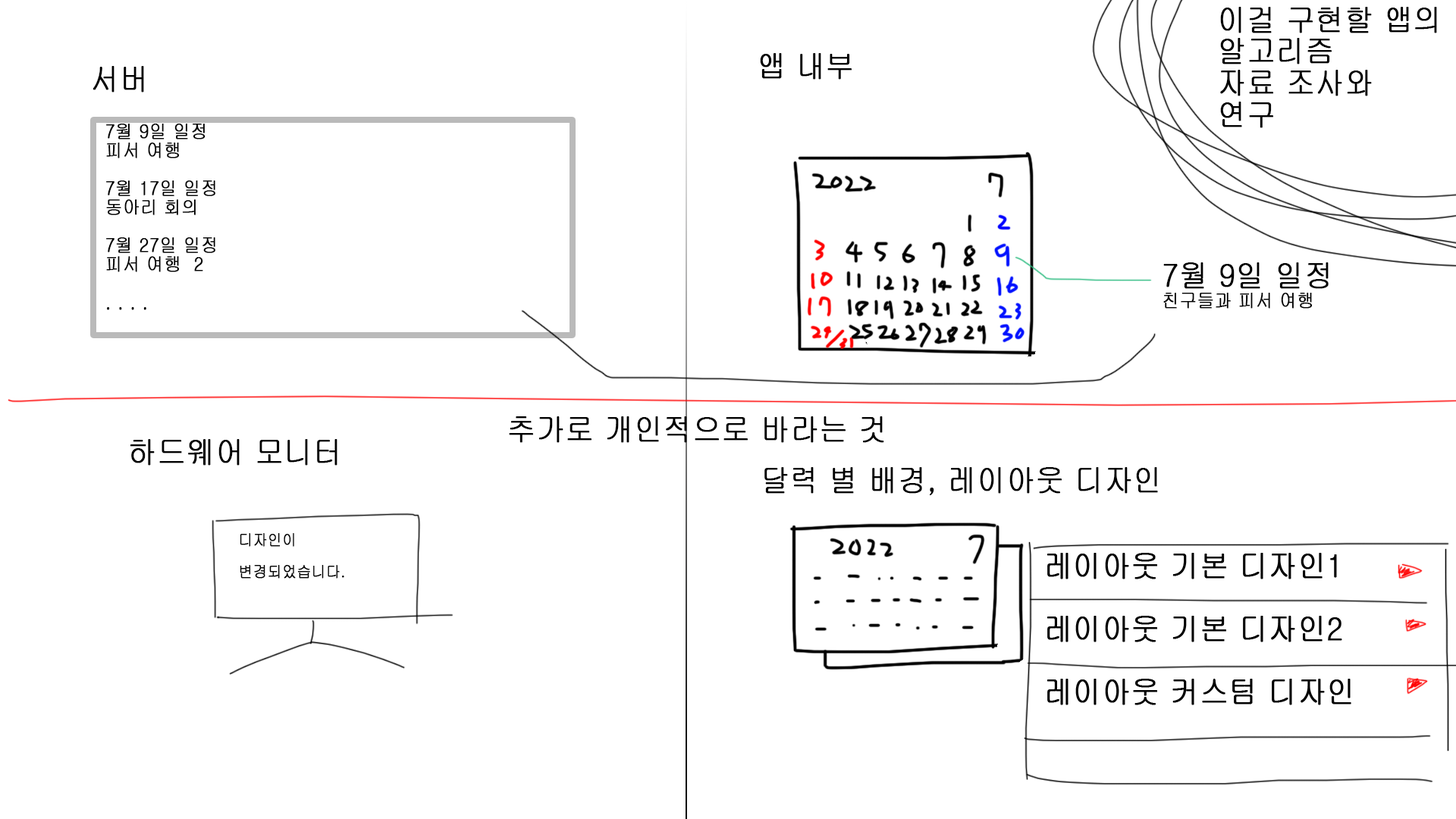
<style>
.page{position:relative;width:1456px;height:819px;background:#ffffff}
.page>*{position:absolute;margin:0}
.t1{font:31.6px/31.6px "Gulim";color:#000000;font-weight:bold;scale:0.9 1}
.t2{font:31.6px "Gulim";color:#000000;font-weight:bold;scale:0.9 1}
.t3{font:19px/19px "Gulim";color:#000000;font-weight:bold;scale:0.9 1}
.t4{font:19px/31.6px "Gulim";color:#000000;font-weight:bold;scale:0.9 1}
.t5{font:15.8px/31.6px "Gulim";color:#000000;font-weight:bold;scale:0.9 1}
</style>
<div class="page">
<p class="t1" style="left:1220px;top:7px;width:217px;height:121px">이걸 구현할 앱의<br>알고리즘<br>자료 조사와<br>연구</p>
<p class="t2" style="left:760px;top:53px;width:92px;height:27px">앱 내부</p>
<p class="t2" style="left:93px;top:66px;width:51px;height:27px">서버</p>
<p class="t3" style="left:106px;top:124px;width:109px;height:186px">7월 9일 일정<br>피서 여행<br><br>7월 17일 일정<br>동아리 회의<br><br>7월 27일 일정<br>피서 여행  2<br><br>. . . .</p>
<p class="t4" style="left:1163px;top:262px;width:166px;height:47px"><span class="t1">7월 9일 일정<br></span>친구들과 피서 여행</p>
<p class="t2" style="left:509px;top:416px;width:375px;height:27px">추가로 개인적으로 바라는 것</p>
<p class="t2" style="left:130px;top:439px;width:207px;height:27px">하드웨어 모니터</p>
<p class="t2" style="left:764px;top:467px;width:394px;height:28px">달력 별 배경, 레이아웃 디자인</p>
<p class="t5" style="left:240px;top:533px;width:104px;height:46px">디자인이<br>변경되었습니다.</p>
</div>
